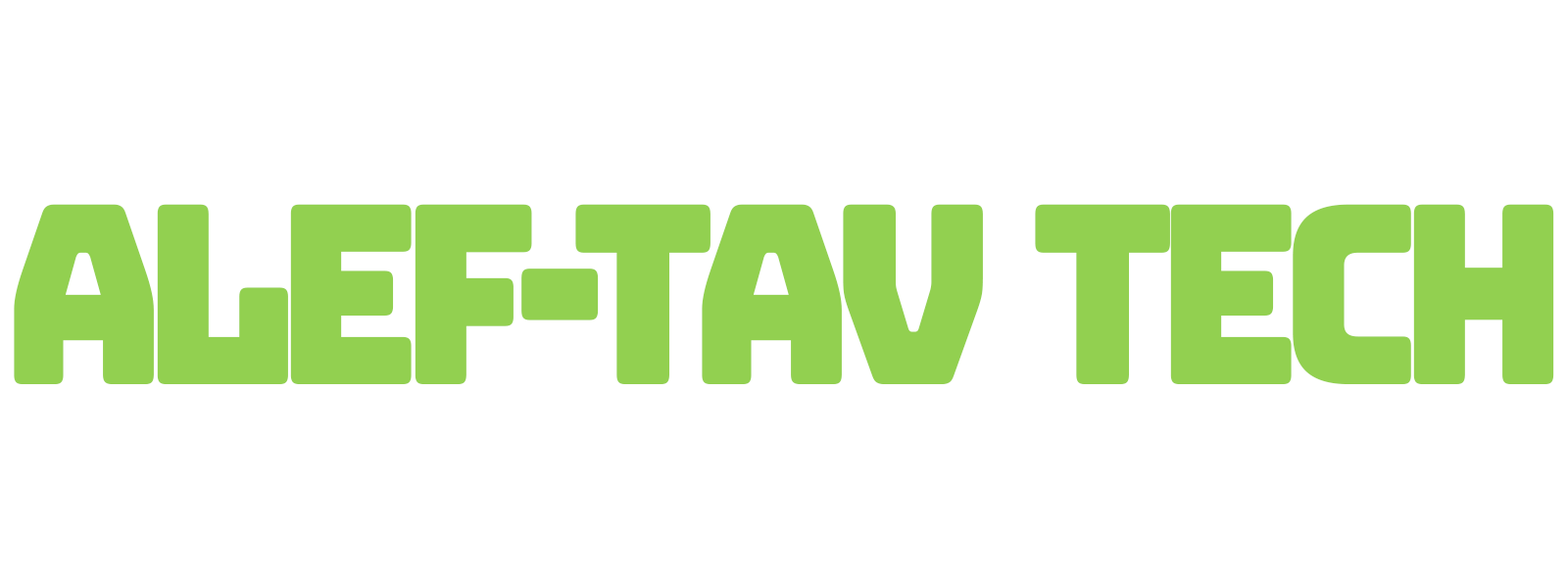
<style>
.page{position:relative;width:1568px;height:588px;background:#ffffff}
.page>*{position:absolute;margin:0}
.t1{font:249.5px "Bungee-Regular";letter-spacing:-0.1em;color:#92d050;scale:0.9 1}
</style>
<div class="page">
<p class="t1" style="left:14px;top:204px;width:1540px;height:180px">Alef-Tav  Tech</p>
</div>
